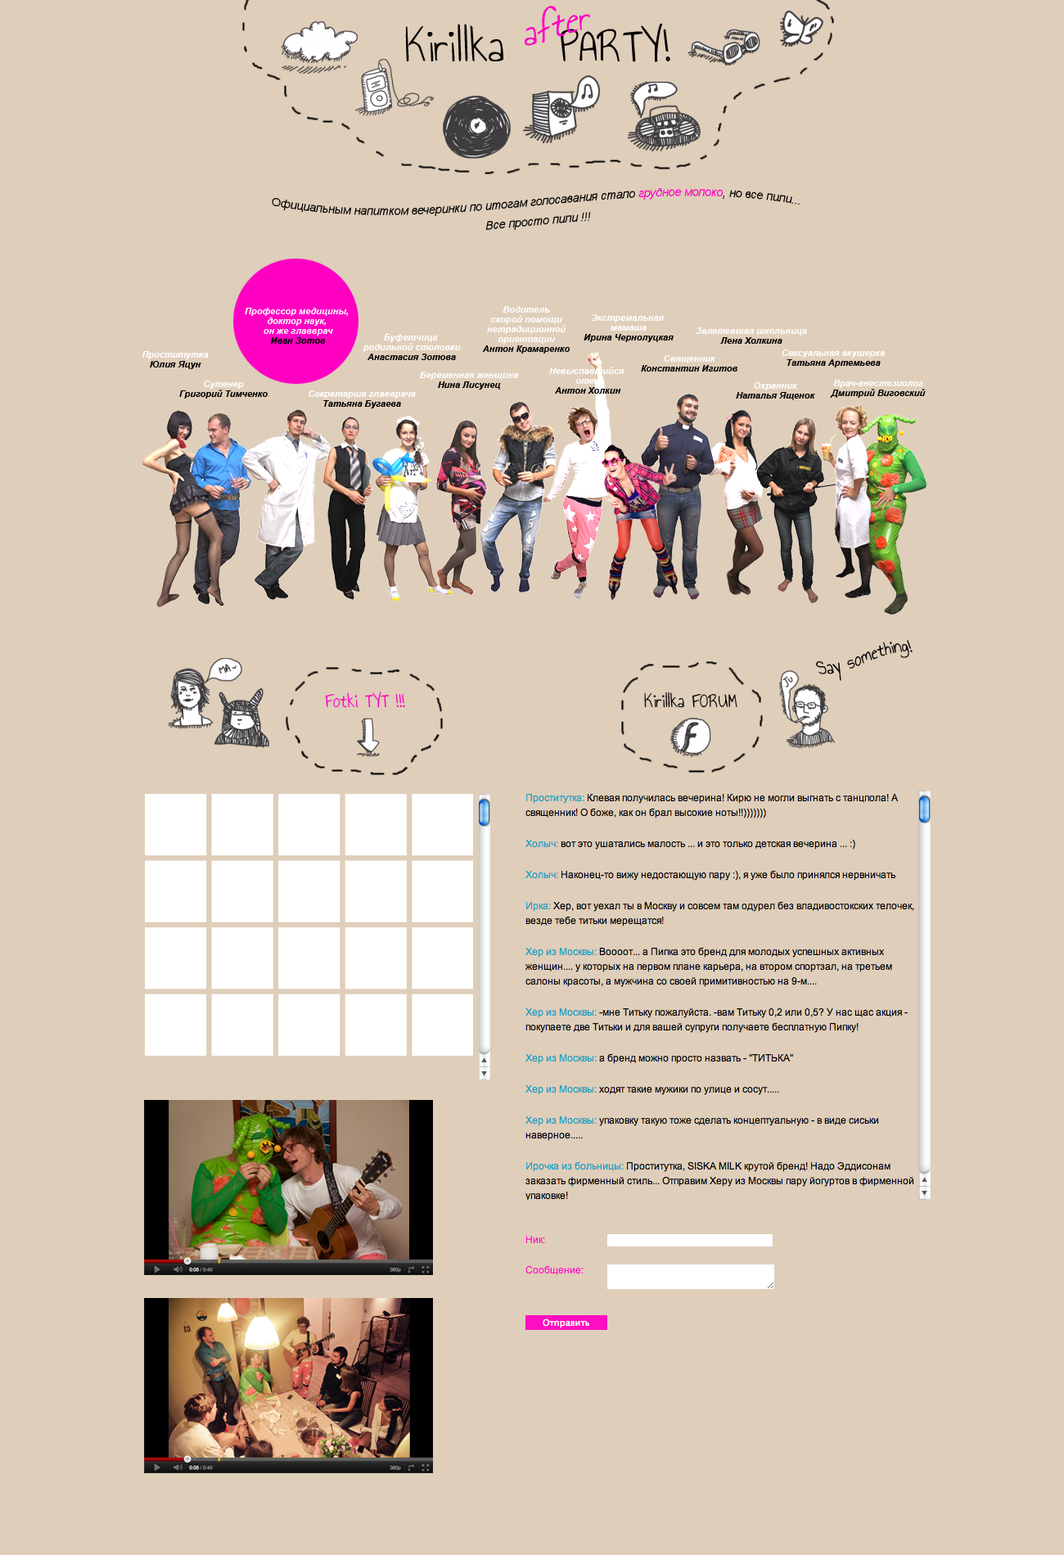
<style>
.page{position:relative;width:1064px;height:1555px;background:#dfceba}
.page>*{position:absolute;margin:0}
.t1{font:39.3px "AnnieUseYourTelescope";color:#ff00c2}
.t2{font:49.1px "AnnieUseYourTelescope";color:#000000}
.t3{font:11.5px/19.6px "Arial-ItalicMT";color:#010101}
.t4{font:11.5px/19.6px "Arial-ItalicMT";color:#ff00c2}
.t5{font:9px/9.8px "Arial-BoldItalicMT";color:#fefefe}
.t6{font:9px/9.8px "Arial-BoldItalicMT";color:#000000}
.t7{font:9px/9.8px "Arial-BoldItalicMT";color:#ffffff}
.t8{font:9px/9.8px "Arial-BoldItalicMT";color:#010101}
.t9{font:19.6px "AnnieUseYourTelescope";color:#000000}
.t10{font:19.6px "AnnieUseYourTelescope";color:#ff00c2}
.t11{font:19.6px "AnnieUseYourTelescope";color:#010101}
</style>
<div class="page">
<p class="t1" style="left:524px;top:6px;width:66px;height:40px">after</p>
<p class="t2" style="left:405px;top:23px;width:265px;height:39px">Kirillka   PARTY!</p>
<p class="t3" style="left:272px;top:188px;width:527px;height:42px;text-align:center">Официальным напитком вечеринки по итогам голосавания стало <span class="t4">грудное молоко</span>, но все пили... <br>Все просто пили !!!</p>
<p class="t5" style="left:245px;top:308px;width:104px;height:36px;text-align:center">Профессор медицины, <br>доктор наук, <br>он же главврач<br><span class="t6">Иван Зотов</span></p>
<p class="t7" style="left:583px;top:314px;width:90px;height:28px;text-align:center">Экстремальная <br>мамаша<br><span class="t8">Ирина Чернолуцкая</span></p>
<p class="t7" style="left:695px;top:327px;width:112px;height:17px;text-align:center">Залетевшая школьница<br><span class="t6">Лена Холкина</span></p>
<p class="t7" style="left:362px;top:334px;width:99px;height:26px;text-align:center">Буфетчица <br>родильной столовки<br><span class="t6">Анастасия Зотова</span></p>
<p class="t7" style="left:142px;top:351px;width:67px;height:18px;text-align:center">Проститутка<br><span class="t6">Юлия Яцун</span></p>
<p class="t7" style="left:781px;top:349px;width:103px;height:18px;text-align:center">Сексуальная акушерка<br><span class="t6">Татьяна Артемьева</span></p>
<p class="t8" style="left:641px;top:355px;width:96px;height:16px;text-align:center"><span class="t7">Священник<br></span>Константин Игитов</p>
<p class="t5" style="left:420px;top:371px;width:99px;height:18px;text-align:center">Беременная женщина<br><span class="t6">Нина Лисунец</span></p>
<p class="t7" style="left:549px;top:367px;width:75px;height:27px;text-align:center">Невыспавшийся <br>отец<br><span class="t6">Антон Холкин</span></p>
<p class="t6" style="left:179px;top:380px;width:89px;height:18px;text-align:center"><span class="t7">Сутенер<br></span>Григорий Тимченко</p>
<p class="t6" style="left:736px;top:382px;width:79px;height:18px;text-align:center"><span class="t7">Охранник<br></span>Наталья Ященок</p>
<p class="t7" style="left:830px;top:380px;width:95px;height:18px;text-align:center">Врач-анестезиолог<br><span class="t6">Дмитрий Виговский</span></p>
<p class="t7" style="left:308px;top:390px;width:108px;height:18px;text-align:center">Секретарша главврача<br><span class="t6">Татьяна Бугаева</span></p>
<p class="t9" style="left:816px;top:640px;width:96px;height:41px;rotate:-12deg">Say something!</p>
<p class="t10" style="left:325px;top:691px;width:80px;height:17px">Fotki TYT !!!</p>
<p class="t11" style="left:644px;top:691px;width:93px;height:17px">Kirillka FORUM</p>
</div>
